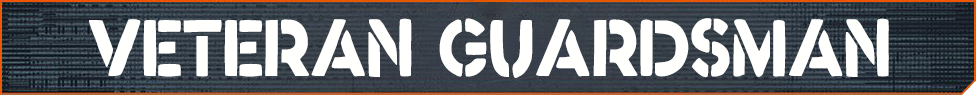
<style>
.page{position:relative;width:976px;height:95px;background:#fffffd}
.page>*{position:absolute;margin:0}
.t1{font:100.4px "Reactive";color:#fffffd;scale:0.87 1}
</style>
<div class="page">
<p class="t1" style="left:89px;top:18px;width:800px;height:60px">veteran guardsman</p>
</div>
